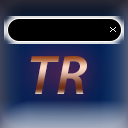
<style>
.page{position:relative;width:128px;height:128px}
.page>*{position:absolute;margin:0}
.t1{font:56px "MyriadPro-SemiboldIt"}
</style>
<div class="page">
<p class="t1" style="left:30px;top:56px;width:57px;height:38px">TR</p>
</div>
